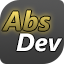
<style>
.page{position:relative;width:64px;height:64px}
.page>*{position:absolute;margin:0}
.t1{font:27px "SegoeUI-BoldItalic"}
.t2{font:25px "SegoeUI-BoldItalic";color:#ffffff}
</style>
<div class="page">
<p class="t1" style="left:2px;top:10px;width:48px;height:21px">Abs</p>
<p class="t2" style="left:16px;top:33px;width:46px;height:19px">Dev</p>
</div>
